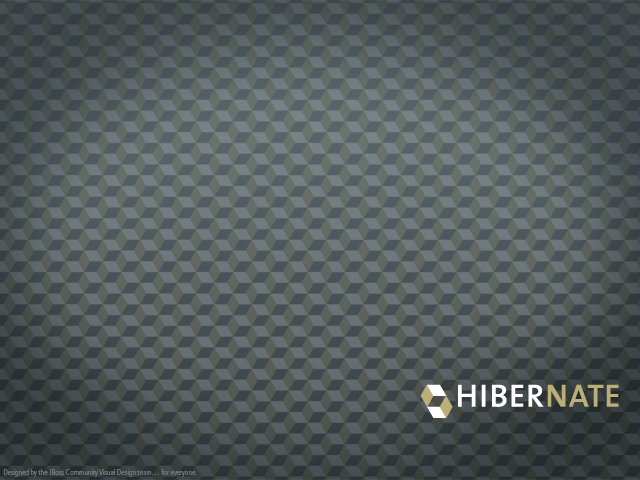
<style>
.page{position:relative;width:640px;height:480px}
.page>*{position:absolute;margin:0}
.t1{font:8px "Frutiger-LightCn";letter-spacing:-0.02em;color:#6d767c}
</style>
<div class="page">
<p class="t1" style="left:3px;top:469px;width:194px;height:8px">Designed by the JBoss Community Visual Design team… for everyone.</p>
</div>
